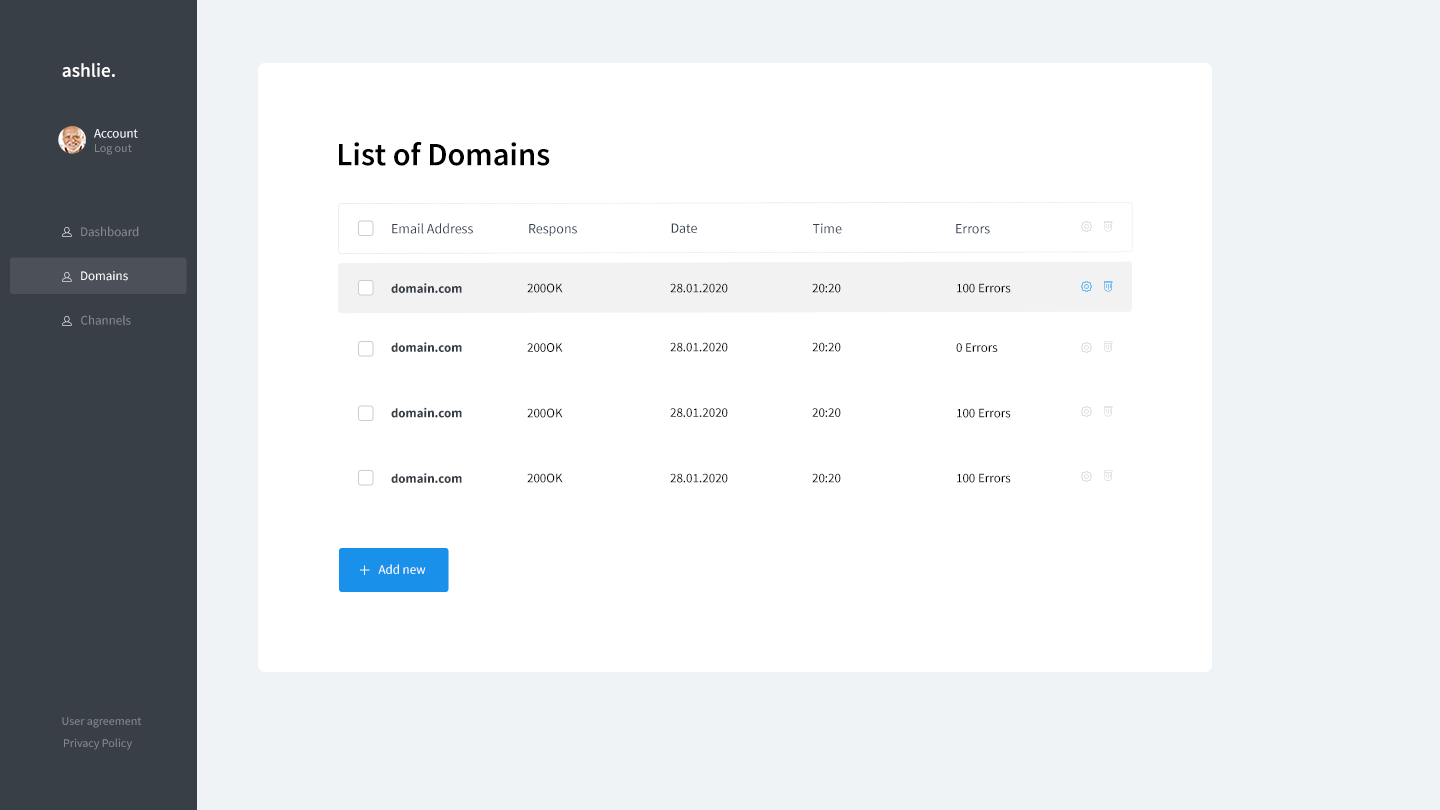
<style>
.page{position:relative;width:1440px;height:810px;background:#ffffff}
.page>*{position:absolute;margin:0}
.t1{font:19.3px "SourceSansPro-SemiBold";color:#ffffff}
.t2{font:13px "SourceSansPro-Regular";color:#ffffff}
.t3{font:12px "SourceSansPro-Regular";color:#85888c}
.t4{font:32.5px "SourceSansPro-SemiBold";color:#000000}
.t5{font:13px "SourceSansPro-Regular";color:#85888c}
.t6{font:14px "SourceSansPro-Regular";color:#354052}
.t7{font:13px "SourceSansPro-Bold";color:#393f47}
.t8{font:13px "SourceSansPro-Regular";color:#000000}
</style>
<div class="page">
<p class="t1" style="left:62px;top:63px;width:53px;height:14px">ashlie.</p>
<p class="t2" style="left:94px;top:129px;width:44px;height:9px">Account</p>
<p class="t3" style="left:95px;top:144px;width:37px;height:11px">Log out</p>
<p class="t4" style="left:339px;top:142px;width:211px;height:24px">List of Domains</p>
<p class="t5" style="left:81px;top:226px;width:58px;height:11px">Dashboard</p>
<p class="t6" style="left:392px;top:223px;width:81px;height:11px">Email Address</p>
<p class="t6" style="left:529px;top:224px;width:48px;height:12px">Respons</p>
<p class="t6" style="left:671px;top:223px;width:26px;height:10px">Date</p>
<p class="t6" style="left:813px;top:223px;width:29px;height:11px">Time</p>
<p class="t6" style="left:956px;top:224px;width:34px;height:10px">Errors</p>
<p class="t2" style="left:81px;top:271px;width:47px;height:10px">Domains</p>
<p class="t7" style="left:391px;top:283px;width:71px;height:10px">domain.com</p>
<p class="t8" style="left:527px;top:283px;width:36px;height:10px">200OK</p>
<p class="t8" style="left:670px;top:283px;width:58px;height:10px">28.01.2020</p>
<p class="t8" style="left:812px;top:283px;width:29px;height:10px">20:20</p>
<p class="t8" style="left:957px;top:283px;width:54px;height:10px">100 Errors</p>
<p class="t5" style="left:81px;top:315px;width:50px;height:10px">Channels</p>
<p class="t7" style="left:391px;top:342px;width:71px;height:10px">domain.com</p>
<p class="t8" style="left:670px;top:342px;width:58px;height:10px">28.01.2020</p>
<p class="t8" style="left:812px;top:342px;width:29px;height:10px">20:20</p>
<p class="t8" style="left:527px;top:343px;width:36px;height:9px">200OK</p>
<p class="t8" style="left:956px;top:343px;width:42px;height:9px">0 Errors</p>
<p class="t7" style="left:391px;top:407px;width:71px;height:11px">domain.com</p>
<p class="t8" style="left:527px;top:408px;width:36px;height:10px">200OK</p>
<p class="t8" style="left:670px;top:408px;width:58px;height:9px">28.01.2020</p>
<p class="t8" style="left:812px;top:408px;width:29px;height:9px">20:20</p>
<p class="t8" style="left:957px;top:408px;width:54px;height:10px">100 Errors</p>
<p class="t7" style="left:391px;top:473px;width:71px;height:10px">domain.com</p>
<p class="t8" style="left:527px;top:473px;width:36px;height:10px">200OK</p>
<p class="t8" style="left:670px;top:473px;width:58px;height:10px">28.01.2020</p>
<p class="t8" style="left:812px;top:473px;width:29px;height:10px">20:20</p>
<p class="t8" style="left:957px;top:473px;width:54px;height:10px">100 Errors</p>
<p class="t2" style="left:378px;top:564px;width:48px;height:10px">Add new</p>
<p class="t3" style="left:62px;top:717px;width:80px;height:11px">User agreement</p>
<p class="t3" style="left:64px;top:738px;width:68px;height:12px">Privacy Policy</p>
</div>
